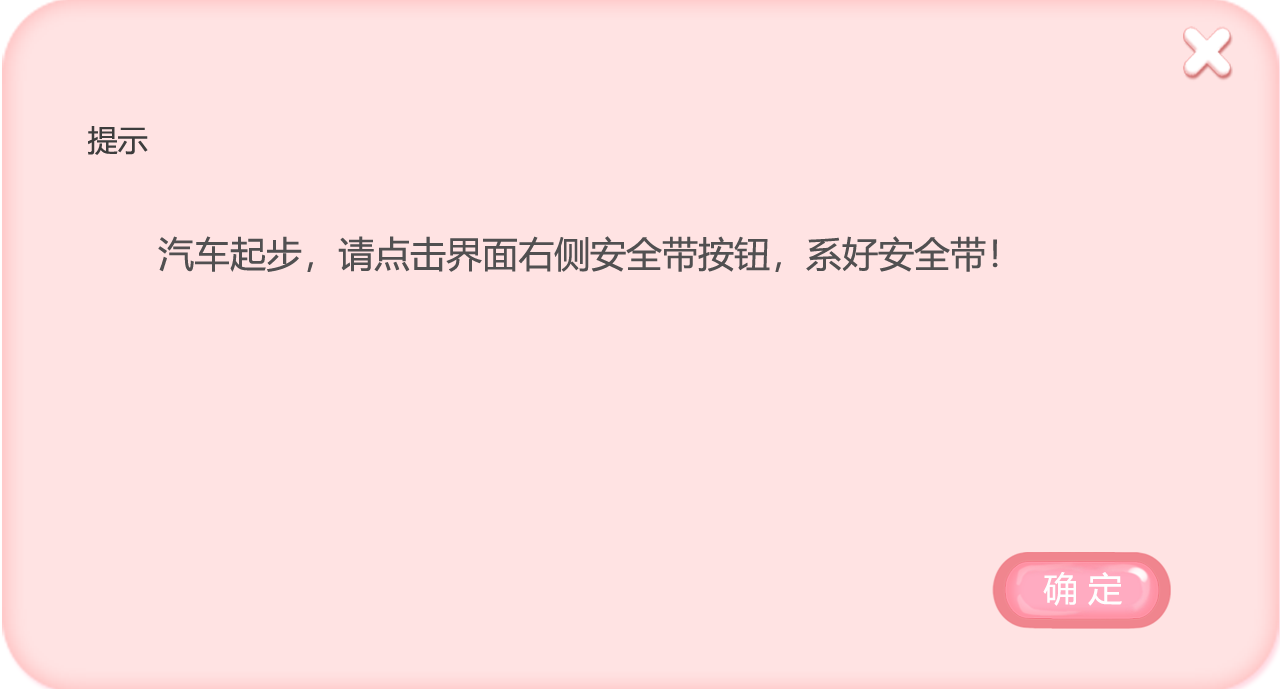
<style>
.page{position:relative;width:1280px;height:689px;background:#ffe3e3}
.page>*{position:absolute;margin:0}
.t1{font:30px "MicrosoftYaHei";color:#3d3d3d}
.t2{font:36px "MicrosoftYaHei";color:#515051}
.t3{font:34.4px "MicrosoftYaHei";color:#fefefe}
</style>
<div class="page">
<p class="t1" style="left:88px;top:126px;width:60px;height:29px">提示</p>
<p class="t2" style="left:158px;top:236px;width:840px;height:36px">汽车起步，请点击界面右侧安全带按钮，系好安全带！</p>
<p class="t3" style="left:1043px;top:572px;width:79px;height:34px">确 定</p>
</div>
